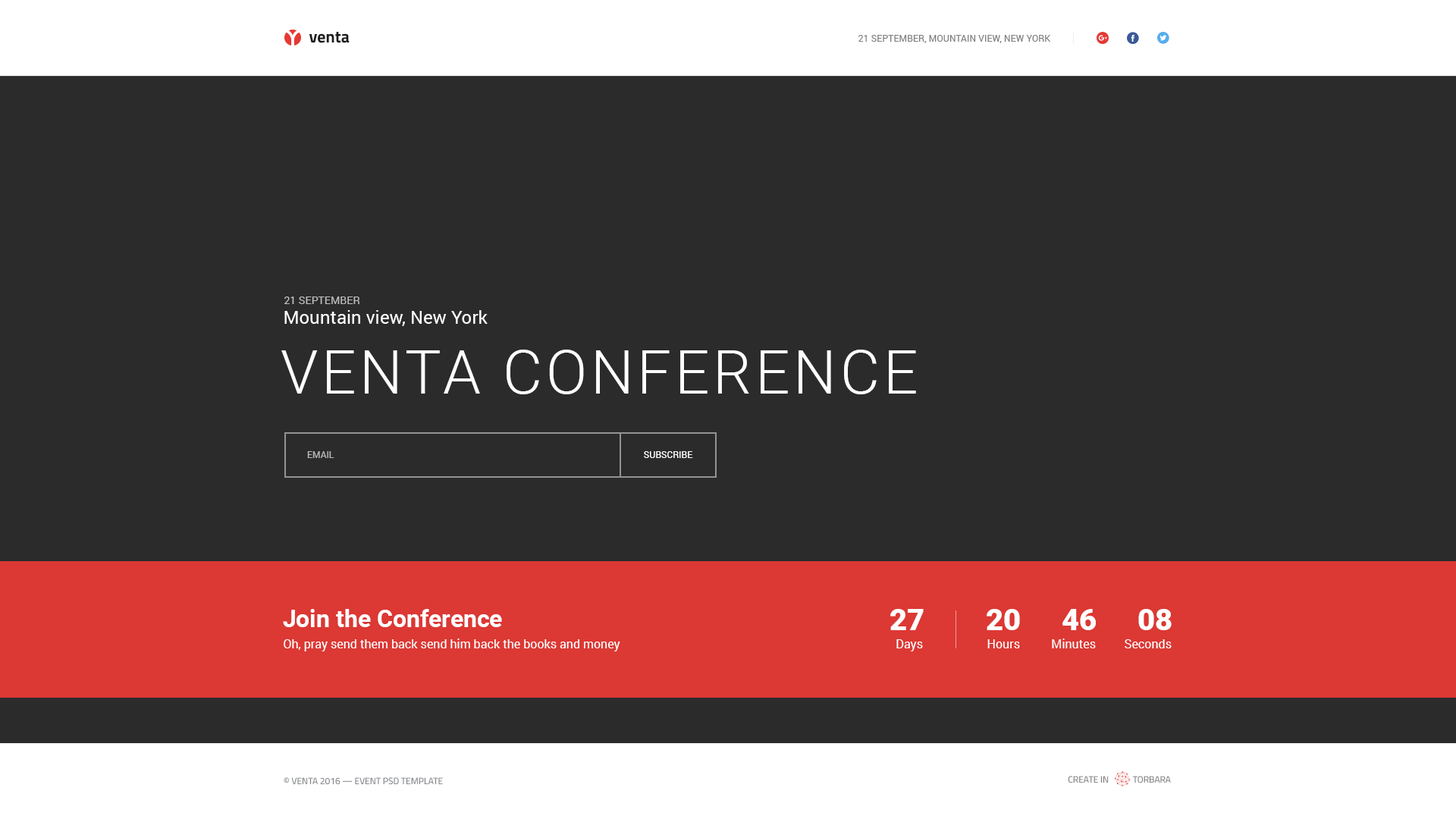
<style>
.page{position:relative;width:1456px;height:819px;background:#2b2b2b}
.page>*{position:absolute;margin:0}
.t1{font:16.7px "TitilliumWeb-Bold";color:#1c1c1c}
.t2{font:9.1px "Roboto-Regular";letter-spacing:0.01em;color:#808080;text-transform:uppercase}
.t3{font:10.6px "Roboto-Regular";color:#bfbfbf;text-transform:uppercase}
.t4{font:18.2px "Roboto-Regular";color:#ffffff}
.t5{font:60.7px "Roboto-Light";letter-spacing:0.06em;color:#ffffff;text-transform:uppercase}
.t6{font:9.1px "Roboto-Regular";color:#b7b7b7;text-transform:uppercase}
.t7{font:9.1px "Roboto-Regular";color:#ffffff;text-transform:uppercase}
.t8{font:24.3px "Roboto-Bold";color:#ffffff}
.t9{font:30.3px "Roboto-Black";color:#ffffff}
.t10{font:12.1px "Roboto-Regular";color:#ffffff}
.t11{font:9.1px "TitilliumWeb-Regular";color:#828488;text-transform:uppercase}
.t12{font:9.1px "TitilliumWeb-Regular";color:#808080;text-transform:uppercase}
</style>
<div class="page">
<p class="t1" style="left:309px;top:32px;width:41px;height:11px">venta</p>
<p class="t2" style="left:858px;top:35px;width:193px;height:8px">21 september, Mountain view, New York</p>
<p class="t3" style="left:284px;top:297px;width:76px;height:7px">21 September</p>
<p class="t4" style="left:284px;top:310px;width:204px;height:16px">Mountain view, New York</p>
<p class="t5" style="left:281px;top:350px;width:635px;height:44px">Venta conference</p>
<p class="t6" style="left:307px;top:451px;width:27px;height:7px">Email</p>
<p class="t7" style="left:644px;top:451px;width:49px;height:7px">Subscribe</p>
<p class="t8" style="left:283px;top:609px;width:219px;height:18px">Join the Conference</p>
<p class="t9" style="left:890px;top:609px;width:34px;height:21px">27</p>
<p class="t9" style="left:987px;top:609px;width:33px;height:21px">20</p>
<p class="t9" style="left:1062px;top:609px;width:34px;height:21px">46</p>
<p class="t9" style="left:1138px;top:609px;width:34px;height:21px">08</p>
<p class="t10" style="left:284px;top:639px;width:336px;height:12px">Oh, pray send them back send him back the books and money</p>
<p class="t10" style="left:896px;top:639px;width:27px;height:12px">Days</p>
<p class="t10" style="left:987px;top:639px;width:33px;height:9px">Hours</p>
<p class="t10" style="left:1052px;top:639px;width:44px;height:9px">Minutes</p>
<p class="t10" style="left:1125px;top:639px;width:47px;height:9px">Seconds</p>
<p class="t11" style="left:284px;top:777px;width:159px;height:8px">© venta 2016 — Event psd template</p>
<p class="t12" style="left:1068px;top:776px;width:103px;height:7px">Create in            Torbara</p>
</div>
